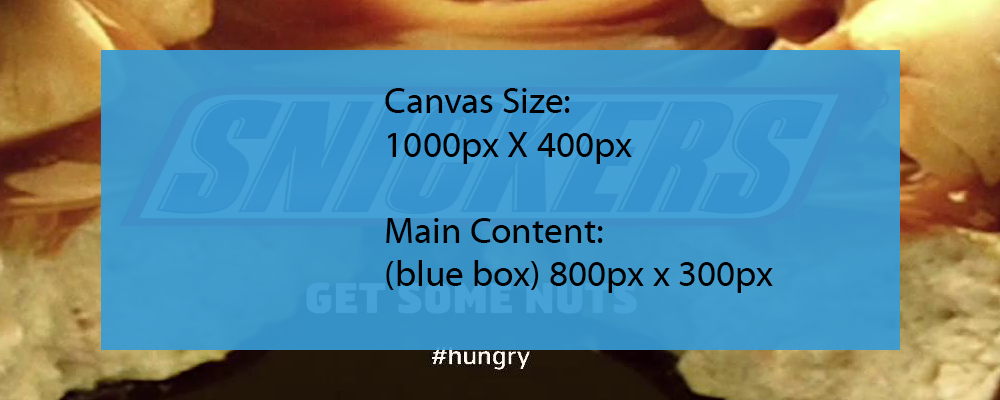
<style>
.page{position:relative;width:1000px;height:400px}
.page>*{position:absolute;margin:0}
.t1{font:36px "MyriadWebPro";color:#000000}
</style>
<div class="page">
<p class="t1" style="left:385px;top:88px;width:388px;height:205px">Canvas Size:<br>1000px X 400px<br><br>Main Content:<br>(blue box) 800px x 300px</p>
</div>
